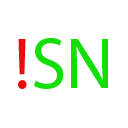
<style>
.page{position:relative;width:128px;height:128px;background:#ffffff}
.page>*{position:absolute;margin:0}
.t1{font:72px "MyriadPro-Regular";color:#14de0a}
.t2{font:72px "MyriadPro-Regular";color:#eb0d0d}
</style>
<div class="page">
<p class="t1" style="left:18px;top:38px;width:90px;height:51px"><span class="t2">!</span>SN</p>
</div>
